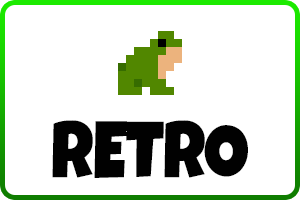
<style>
.page{position:relative;width:300px;height:200px;background:#ffffff}
.page>*{position:absolute;margin:0}
.t1{font:80.5px "LuckiestGuy-Regular";letter-spacing:-0.01em;color:#010101;text-transform:uppercase;scale:0.87 1}
</style>
<div class="page">
<p class="t1" style="left:52px;top:120px;width:196px;height:58px">rETRO</p>
</div>
